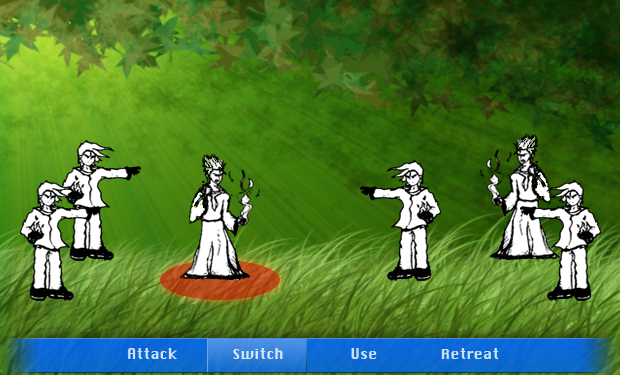
<style>
.page{position:relative;width:620px;height:375px}
.page>*{position:absolute;margin:0}
.t1{font:14px "Krungthep";color:#cee1f6}
.t2{font:14px "Krungthep";color:#d6e5f8}
</style>
<div class="page">
<p class="t1" style="left:128px;top:348px;width:49px;height:11px">Attack</p>
<p class="t2" style="left:233px;top:348px;width:50px;height:11px">Switch</p>
<p class="t1" style="left:351px;top:348px;width:26px;height:11px">Use</p>
<p class="t1" style="left:441px;top:348px;width:58px;height:11px">Retreat</p>
</div>
